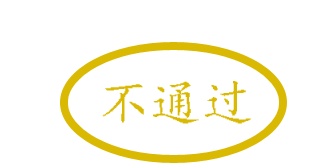
<style>
.page{position:relative;width:335px;height:168px;background:#ffffff}
.page>*{position:absolute;margin:0}
.t1{font:51.3px "¿¬Ìå-Regular";color:#dab902}
</style>
<div class="page">
<p class="t1" style="left:102px;top:81px;width:149px;height:43px">不通过</p>
</div>
